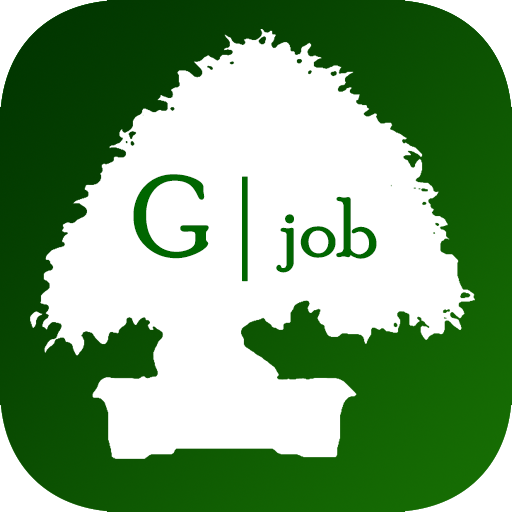
<style>
.page{position:relative;width:512px;height:512px;background:#ffffff}
.page>*{position:absolute;margin:0}
.t1{font:83px "PoorRichard-Regular";letter-spacing:-0.02em;color:#006600;font-weight:bold}
.t2{font:114px "PoorRichard-Regular";letter-spacing:0.18em;color:#006600;font-weight:bold}
</style>
<div class="page">
<p class="t1" style="left:133px;top:174px;width:244px;height:108px"><span class="t2">G|</span>job</p>
</div>
